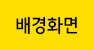
<style>
.page{position:relative;width:94px;height:50px;background:#ffdf01}
.page>*{position:absolute;margin:0}
.t1{font:18px "THEJung150";letter-spacing:-0.05em;color:#000000}
</style>
<div class="page">
<p class="t1" style="left:16px;top:16px;width:62px;height:19px">배경화면</p>
</div>
